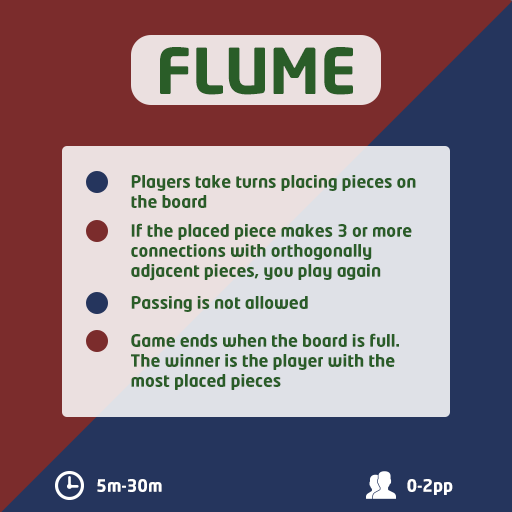
<style>
.page{position:relative;width:512px;height:512px;background:#25355d}
.page>*{position:absolute;margin:0}
.t1{font:62.5px "NeoTech-Bold";color:#2a5d28}
.t2{font:16.7px "NeoTech-Bold";color:#2a5d28}
.t3{font:16.7px "NeoTech-Bold";color:#ffffff}
</style>
<div class="page">
<p class="t1" style="left:160px;top:47px;width:193px;height:48px">FLUME</p>
<p class="t2" style="left:131px;top:175px;width:285px;height:33px">Players take turns placing pieces on the board</p>
<p class="t2" style="left:131px;top:223px;width:281px;height:58px">If the placed piece makes 3 or more connections with orthogonally adjacent pieces, you play again</p>
<p class="t2" style="left:131px;top:296px;width:177px;height:16px">Passing is not allowed</p>
<p class="t2" style="left:131px;top:333px;width:268px;height:57px">Game ends when the board is full. The winner is the player with the most placed pieces</p>
<p class="t3" style="left:97px;top:479px;width:65px;height:13px">5m-30m</p>
<p class="t3" style="left:407px;top:479px;width:46px;height:16px">0-2pp</p>
</div>
